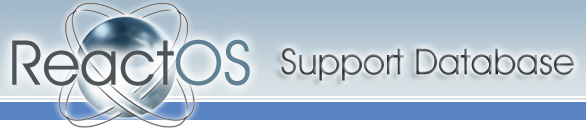
<style>
.page{position:relative;width:586px;height:129px}
.page>*{position:absolute;margin:0}
.t1{font:36px "AvantGardeITCbyBT-Book";color:#4d5457}
</style>
<div class="page">
<p class="t1" style="left:281px;top:48px;width:293px;height:33px">Support Database</p>
</div>
